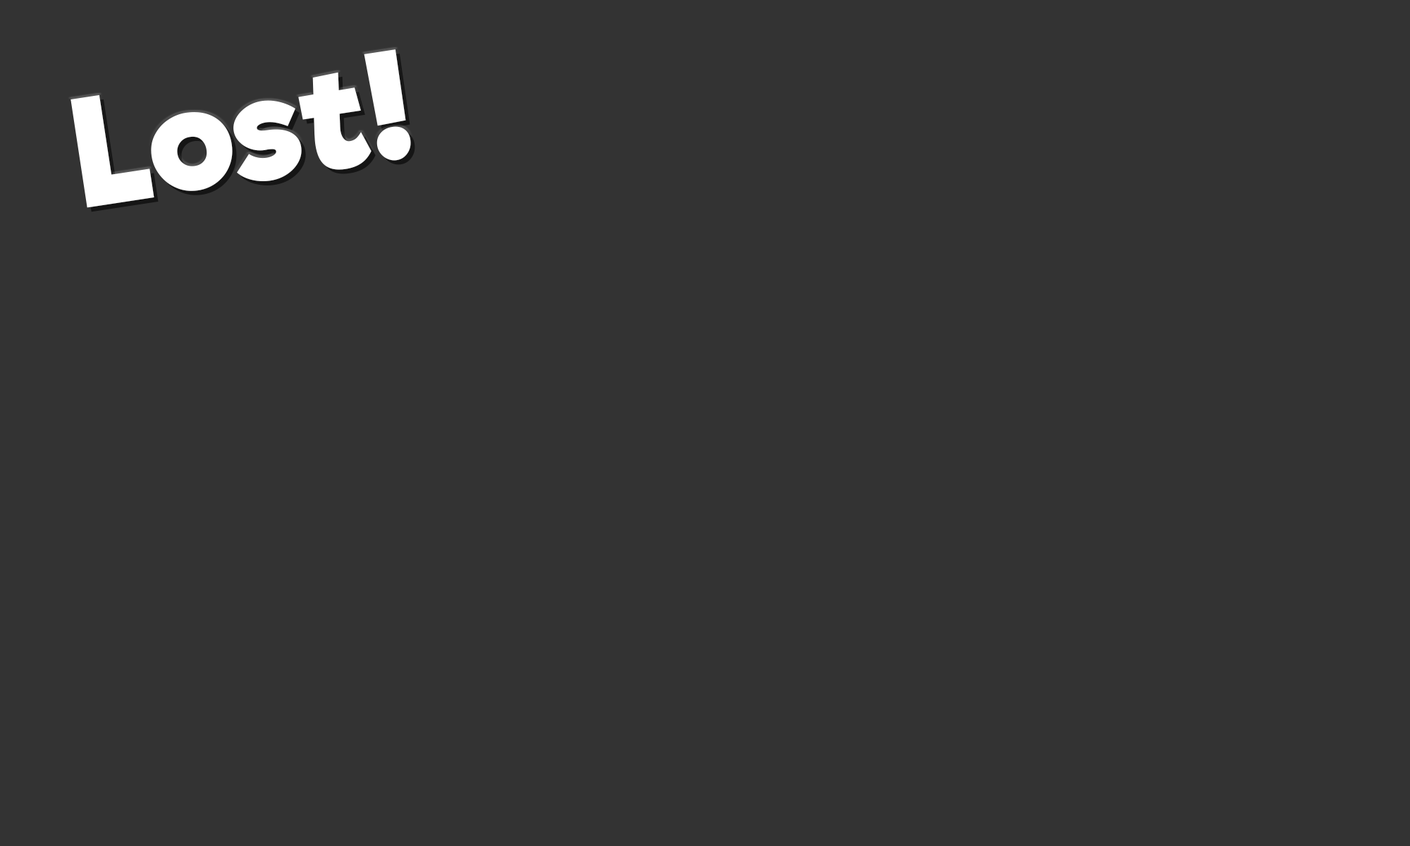
<style>
.page{position:relative;width:1410px;height:846px;background:#333333}
.page>*{position:absolute;margin:0}
.t1{font:143.1px "RifficFree-Bold";color:#ffffff;font-weight:bold}
</style>
<div class="page">
<p class="t1" style="left:70px;top:49px;width:341px;height:159px;rotate:-9deg">Lost!</p>
</div>
